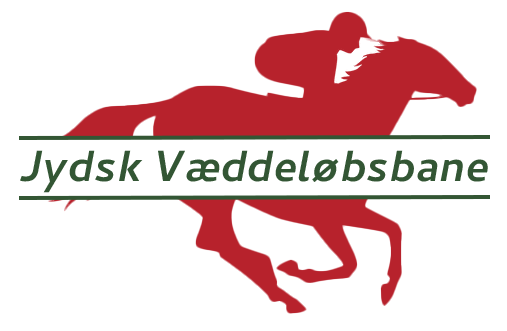
<style>
.page{position:relative;width:507px;height:331px;background:#ffffff}
.page>*{position:absolute;margin:0}
.t1{font:55px "CambayDevanagari-BoldOblique";letter-spacing:0.005em;color:#335634}
</style>
<div class="page">
<p class="t1" style="left:20px;top:150px;width:468px;height:43px">Jydsk Væddeløbsbane</p>
</div>
